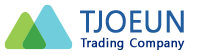
<style>
.page{position:relative;width:201px;height:56px;background:#ffffff}
.page>*{position:absolute;margin:0}
.t1{font:30px "MalgunGothicRegular";color:#215c9e;font-weight:bold;scale:0.95 1}
.t2{font:12px "MalgunGothicRegular";letter-spacing:0.05em;color:#022979;font-weight:bold;scale:0.95 1}
</style>
<div class="page">
<p class="t1" style="left:80px;top:10px;width:104px;height:23px">TJOEUN</p>
<p class="t2" style="left:80px;top:37px;width:105px;height:13px">Trading Company</p>
</div>
